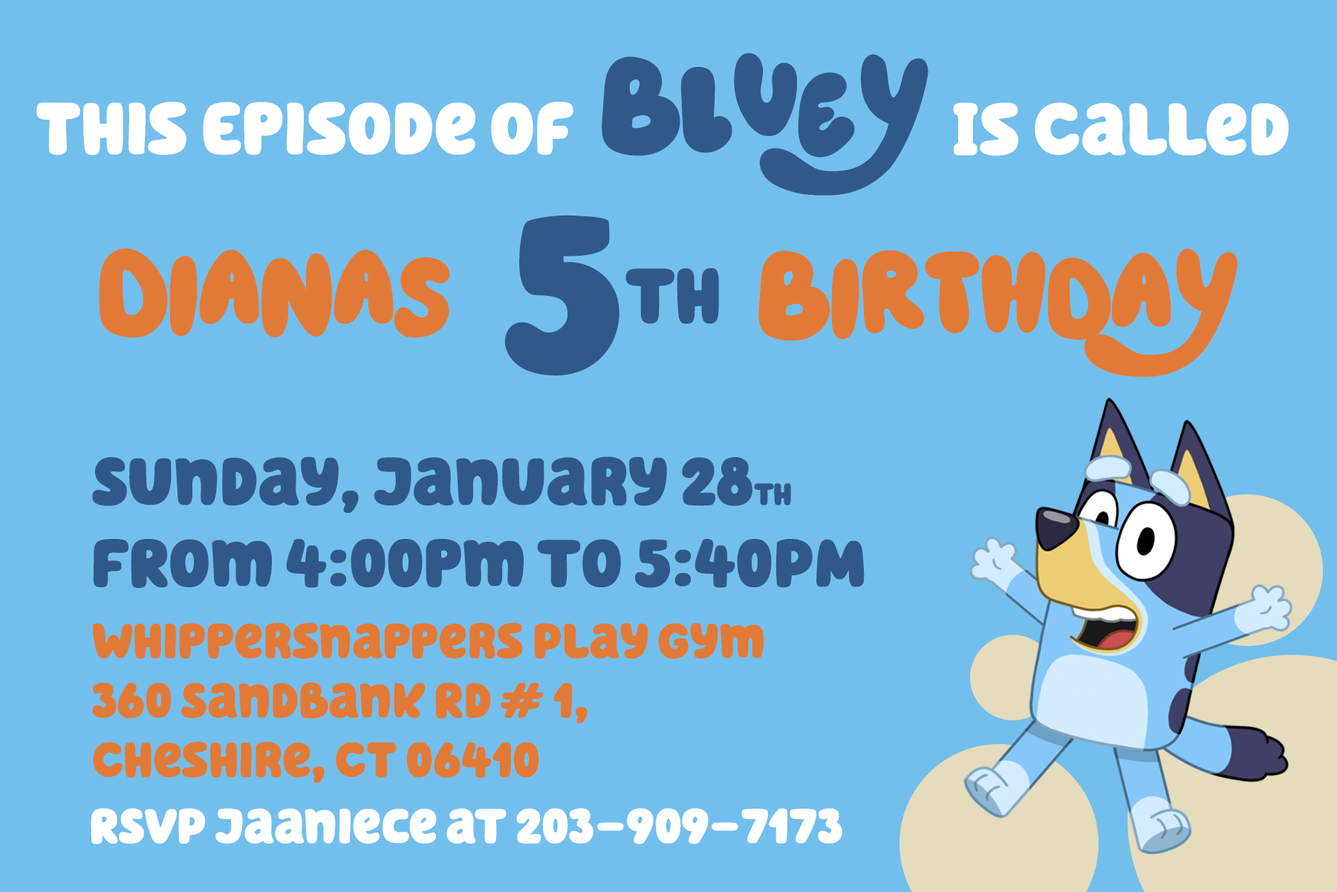
<style>
.page{position:relative;width:1337px;height:892px;background:#72bfed}
.page>*{position:absolute;margin:0}
.t1{font:136.2px "Heyam";color:#30598a;font-weight:bold}
.t2{font:74.3px "HelloHeadlineW00-Regular";color:#ffffff;font-weight:bold}
.t3{font:222.9px "HelloHeadlineW00-Regular";color:#30598a;font-weight:bold}
.t4{font:123.8px "Heyam";color:#e27a37;font-weight:bold}
.t5{font:77.4px "HelloHeadlineW00-Regular";color:#30598a;font-weight:bold}
.t6{font:49.5px "HelloHeadlineW00-Regular";color:#e27a37;font-weight:bold}
.t7{font:68.1px "HelloHeadlineW00-Regular";color:#30598a;font-weight:bold}
.t8{font:31px "HelloHeadlineW00-Regular";color:#30598a;font-weight:bold}
.t9{font:49.5px/71.2px "HelloHeadlineW00-Regular";color:#e27a37;font-weight:bold}
.t10{font:49.5px "HelloHeadlineW00-Regular";color:#ffffff;font-weight:bold}
</style>
<div class="page">
<p class="t1" style="left:602px;top:53px;width:327px;height:142px">Bluey</p>
<p class="t2" style="left:36px;top:102px;width:538px;height:53px">This Episode of</p>
<p class="t2" style="left:953px;top:103px;width:336px;height:53px">Is Called</p>
<p class="t3" style="left:504px;top:215px;width:116px;height:161px">5</p>
<p class="t4" style="left:99px;top:248px;width:351px;height:90px">Dianas</p>
<p class="t4" style="left:759px;top:248px;width:479px;height:129px">Birthday</p>
<p class="t5" style="left:626px;top:267px;width:93px;height:57px">th</p>
<p class="t6" style="left:92px;top:456px;width:773px;height:327px"><span class="t7">Sunday, January 28</span><span class="t8">th <br></span><span class="t7">FRom 4:00pm to 5:40PM<br></span><span class="t9">Whippersnappers Play Gym<br></span>360 Sandbank Rd # 1, <br>Cheshire, CT 06410</p>
<p class="t10" style="left:91px;top:808px;width:752px;height:36px">RSVP Jaaniece at 203-909-7173</p>
</div>
